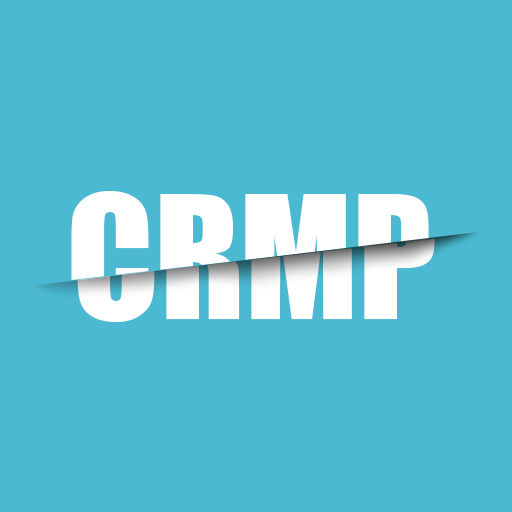
<style>
.page{position:relative;width:512px;height:512px;background:#4bb9d1}
.page>*{position:absolute;margin:0}
.t1{font:158.3px "Impact";color:#ffffff}
</style>
<div class="page">
<p class="t1" style="left:71px;top:191px;width:358px;height:131px">CRMP</p>
<p class="t1" style="left:77px;top:191px;width:358px;height:131px">CRMP</p>
</div>
